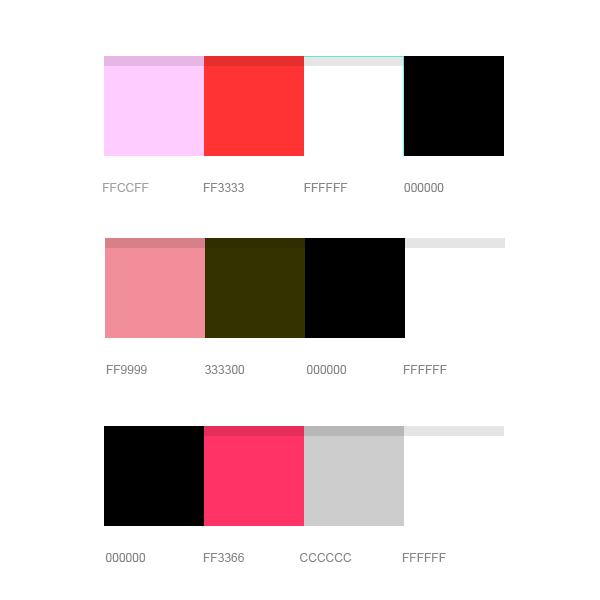
<style>
.page{position:relative;width:600px;height:600px;background:#ffffff}
.page>*{position:absolute;margin:0}
.t1{font:12px "ArialMT";color:#878787;text-transform:uppercase}
</style>
<div class="page">
<p class="t1" style="left:203px;top:183px;width:41px;height:9px">ff3333</p>
<p class="t1" style="left:304px;top:183px;width:44px;height:9px">FFFFFF</p>
<p class="t1" style="left:404px;top:183px;width:40px;height:9px">000000</p>
<p class="t1" style="left:106px;top:365px;width:41px;height:9px">ff9999</p>
<p class="t1" style="left:205px;top:365px;width:40px;height:9px">333300</p>
<p class="t1" style="left:306px;top:365px;width:41px;height:9px">000000</p>
<p class="t1" style="left:403px;top:365px;width:44px;height:9px">FFFFFF</p>
<p class="t1" style="left:105px;top:553px;width:41px;height:9px">000000</p>
<p class="t1" style="left:203px;top:553px;width:41px;height:9px">ff3366</p>
<p class="t1" style="left:300px;top:553px;width:52px;height:9px">cccccc</p>
<p class="t1" style="left:402px;top:553px;width:44px;height:9px">ffffff</p>
</div>
